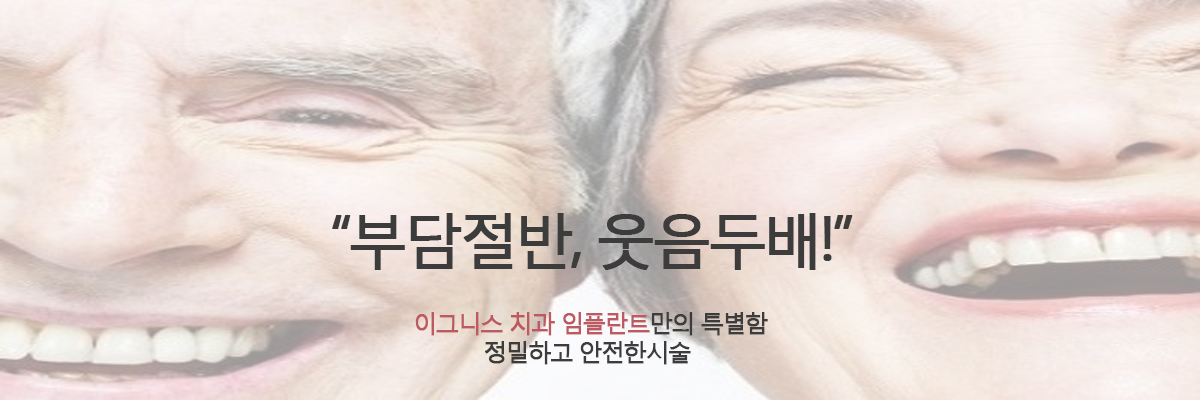
<style>
.page{position:relative;width:1200px;height:400px}
.page>*{position:absolute;margin:0}
.t1{font:60px "MalgunGothicRegular";letter-spacing:-0.1em;color:#3c3c3c;font-weight:bold}
.t2{font:24px "MalgunGothicRegular";letter-spacing:-0.1em;color:#3c3c3c;font-weight:bold}
.t3{font:24px "MalgunGothicRegular";letter-spacing:-0.1em;color:#bd5960;font-weight:bold}
</style>
<div class="page">
<p class="t1" style="left:332px;top:213px;width:521px;height:57px">“부담절반, 웃음두배!”</p>
<p class="t2" style="left:415px;top:312px;width:353px;height:53px;text-align:center"><span class="t3">이그니스 치과 임플란트</span>만의 특별함<br>정밀하고 안전한시술</p>
</div>
